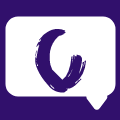
<style>
.page{position:relative;width:120px;height:120px;background:#ffffff}
.page>*{position:absolute;margin:0}
.t1{font:91px "Edo";letter-spacing:-0.5em;color:#31106c;font-weight:bold}
</style>
<div class="page">
<p class="t1" style="left:32px;top:26px;width:55px;height:67px;rotate:-36deg">C</p>
</div>
